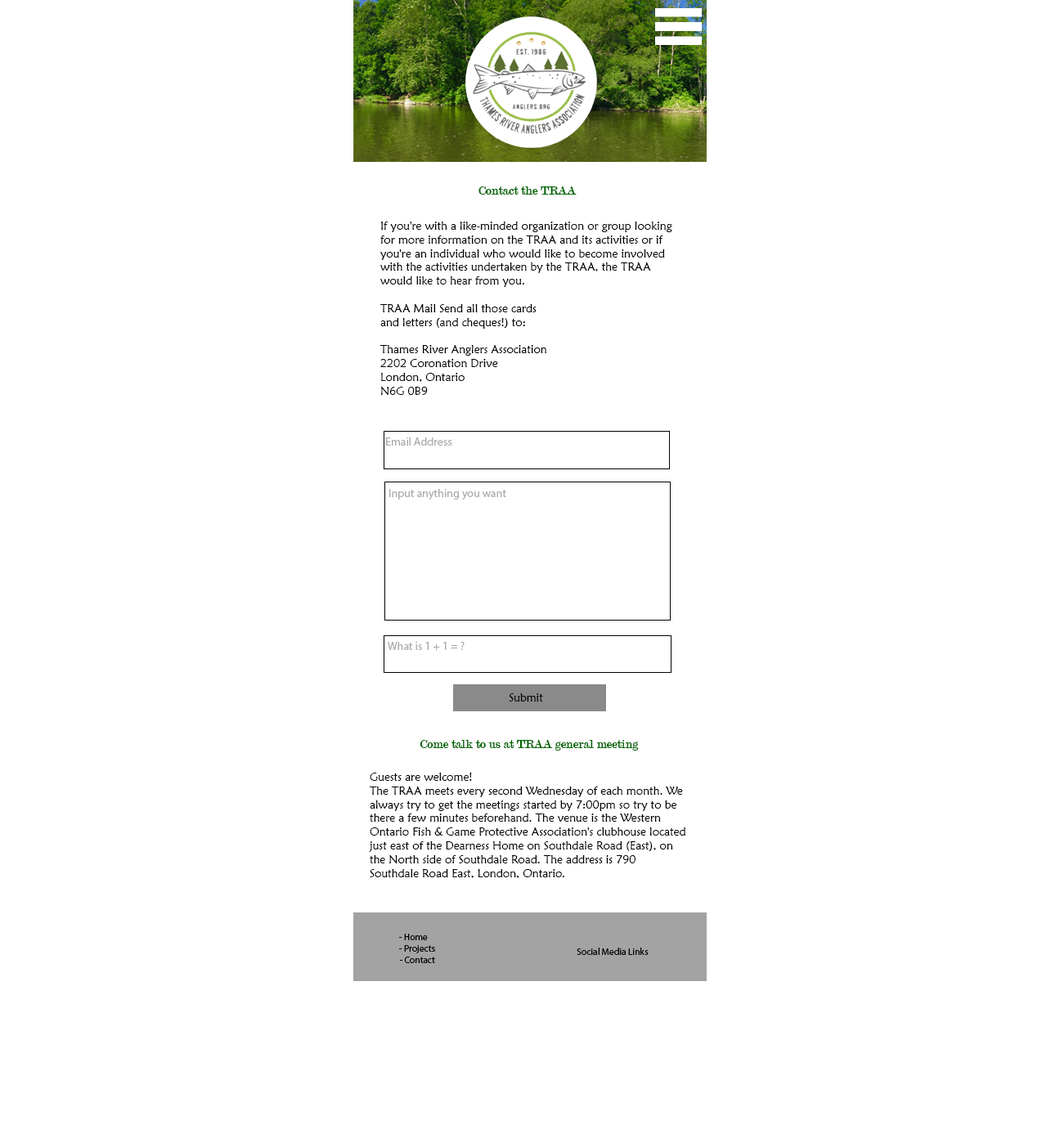
<style>
.page{position:relative;width:1060px;height:1125px;background:#ffffff}
.page>*{position:absolute;margin:0}
.t1{font:13.1px "Modern-Regular";color:#006600}
.t2{font:11.4px "MaiandraGD-Regular";color:#000000}
.t3{font:11.4px "MyriadPro-Regular";color:#acacac}
.t4{font:9.4px "MyriadPro-Regular";color:#000000}
</style>
<div class="page">
<p class="t1" style="left:478px;top:186px;width:98px;height:9px">Contact the TRAA</p>
<p class="t2" style="left:380px;top:222px;width:292px;height:173px">If you're with a like-minded organization or group looking for more information on the TRAA and its activities or if you're an individual who would like to become involved with the activities undertaken by the TRAA, the TRAA would like to hear from you.<br><br>TRAA Mail Send all those cards <br>and letters (and cheques!) to:<br><br>Thames River Anglers Association<br>2202 Coronation Drive<br>London, Ontario<br>N6G 0B9</p>
<p class="t3" style="left:386px;top:437px;width:66px;height:9px">Email Address</p>
<p class="t3" style="left:389px;top:489px;width:117px;height:11px">Input anything you want</p>
<p class="t3" style="left:388px;top:642px;width:76px;height:9px">What is 1 + 1 = ?</p>
<p class="t2" style="left:509px;top:693px;width:34px;height:9px">Submit</p>
<p class="t1" style="left:419px;top:740px;width:220px;height:11px">Come talk to us at TRAA general meeting</p>
<p class="t2" style="left:369px;top:773px;width:316px;height:105px">Guests are welcome!<br>The TRAA meets every second Wednesday of each month. We always try to get the meetings started by 7:00pm so try to be there a few minutes beforehand. The venue is the Western Ontario Fish &amp; Game Protective Association's clubhouse located just east of the Dearness Home on Southdale Road (East), on the North side of Southdale Road. The address is 790 Southdale Road East, London, Ontario.</p>
<p class="t4" style="left:399px;top:934px;width:36px;height:29px;text-align:center">- Home<br>    - Projects<br>    - Contact</p>
<p class="t4" style="left:576px;top:948px;width:72px;height:7px">Social Media Links</p>
</div>
